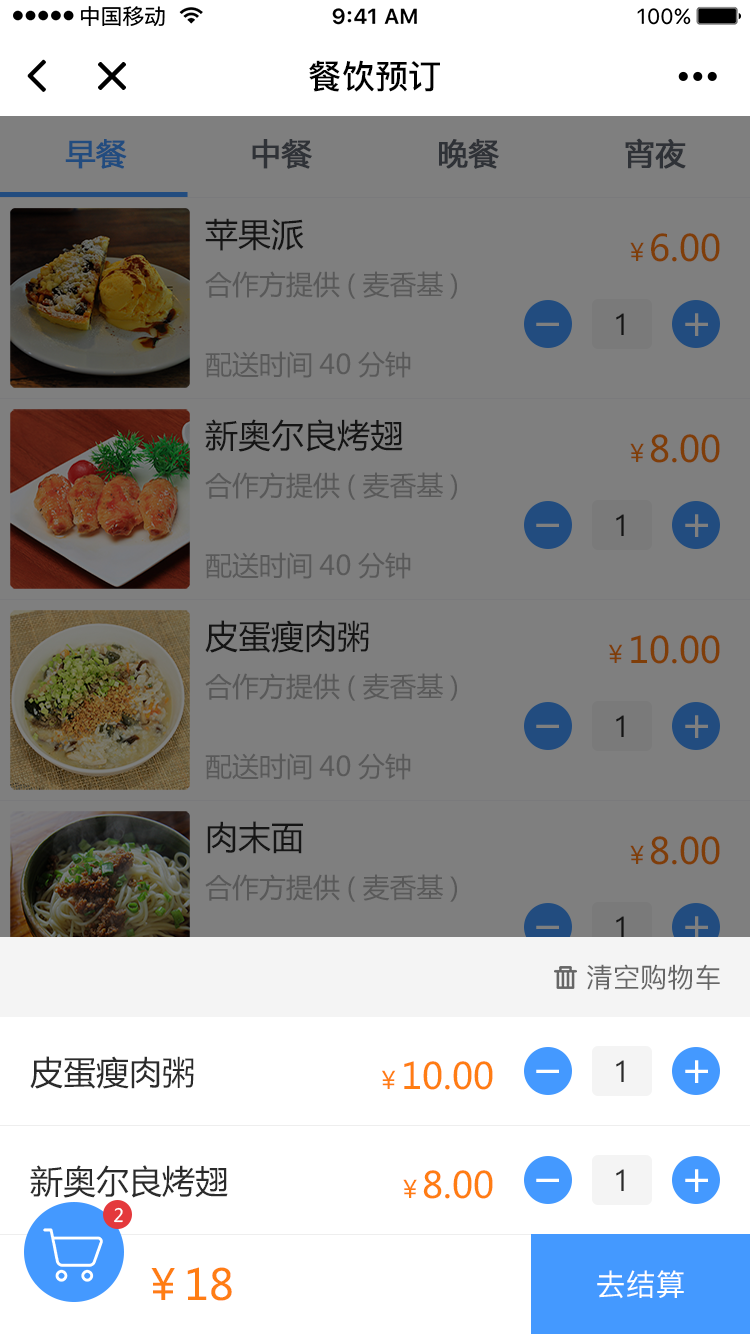
<style>
.page{position:relative;width:750px;height:1334px;background:#7f7f7f}
.page>*{position:absolute;margin:0}
.t1{font:33.2px "PingFang-SC-Bold";color:#000000}
.t2{font:30px "MicrosoftYaHei";color:#224c7f;font-weight:bold}
.t3{font:30px "MicrosoftYaHei";color:#2f3237;font-weight:bold}
.t4{font:33px "MicrosoftYaHei";color:#2b2b2b}
.t5{font:36px "MicrosoftYaHei";color:#7f3e09}
.t6{font:24px "MicrosoftYaHei";color:#7f3e09}
.t7{font:27px "MicrosoftYaHei";color:#595959}
.t8{font:30px "PingFang-SC-Medium";color:#2b2b2b}
.t9{font:27.2px "PingFang-SC-Medium";color:#666666}
.t10{font:36px "MicrosoftYaHei";color:#ff7d13}
.t11{font:24px "MicrosoftYaHei";color:#ff7d13}
.t12{font:18.1px "MicrosoftYaHei";color:#ffffff}
.t13{font:42.3px "MicrosoftYaHei";color:#ff7d13}
.t14{font:30px "PingFang-SC-Medium";color:#ffffff}
</style>
<div class="page">
<p class="t1" style="left:309px;top:60px;width:131px;height:32px">餐饮预订</p>
<p class="t2" style="left:65px;top:139px;width:62px;height:30px">早餐</p>
<p class="t3" style="left:252px;top:139px;width:60px;height:30px">中餐</p>
<p class="t3" style="left:439px;top:139px;width:60px;height:30px">晚餐</p>
<p class="t3" style="left:625px;top:138px;width:61px;height:31px">宵夜</p>
<p class="t4" style="left:205px;top:218px;width:99px;height:33px">苹果派</p>
<p class="t5" style="left:630px;top:233px;width:90px;height:29px"><span class="t6">￥</span>6.00</p>
<p class="t7" style="left:205px;top:271px;width:252px;height:28px">合作方提供(麦香基)</p>
<p class="t8" style="left:616px;top:313px;width:8px;height:22px">1</p>
<p class="t7" style="left:205px;top:351px;width:206px;height:27px">配送时间40分钟</p>
<p class="t4" style="left:205px;top:419px;width:198px;height:33px">新奥尔良烤翅</p>
<p class="t5" style="left:630px;top:434px;width:90px;height:29px"><span class="t6">￥</span>8.00</p>
<p class="t7" style="left:205px;top:472px;width:252px;height:28px">合作方提供(麦香基)</p>
<p class="t8" style="left:616px;top:514px;width:8px;height:22px">1</p>
<p class="t7" style="left:205px;top:552px;width:206px;height:27px">配送时间40分钟</p>
<p class="t4" style="left:205px;top:620px;width:164px;height:33px">皮蛋瘦肉粥</p>
<p class="t5" style="left:609px;top:635px;width:111px;height:29px"><span class="t6">￥</span>10.00</p>
<p class="t7" style="left:205px;top:673px;width:252px;height:28px">合作方提供(麦香基)</p>
<p class="t8" style="left:616px;top:715px;width:8px;height:22px">1</p>
<p class="t7" style="left:205px;top:753px;width:206px;height:27px">配送时间40分钟</p>
<p class="t4" style="left:207px;top:821px;width:96px;height:33px">肉末面</p>
<p class="t5" style="left:630px;top:836px;width:90px;height:29px"><span class="t6">￥</span>8.00</p>
<p class="t7" style="left:205px;top:874px;width:252px;height:28px">合作方提供(麦香基)</p>
<p class="t8" style="left:616px;top:916px;width:8px;height:22px">1</p>
<p class="t9" style="left:587px;top:964px;width:133px;height:26px">清空购物车</p>
<p class="t4" style="left:30px;top:1056px;width:164px;height:33px">皮蛋瘦肉粥</p>
<p class="t10" style="left:382px;top:1061px;width:111px;height:29px"><span class="t11">￥</span>10.00</p>
<p class="t8" style="left:616px;top:1060px;width:8px;height:22px">1</p>
<p class="t4" style="left:30px;top:1165px;width:198px;height:33px">新奥尔良烤翅</p>
<p class="t8" style="left:616px;top:1169px;width:8px;height:22px">1</p>
<p class="t10" style="left:403px;top:1170px;width:90px;height:29px"><span class="t11">￥</span>8.00</p>
<p class="t12" style="left:114px;top:1207px;width:9px;height:16px">2</p>
<p class="t13" style="left:151px;top:1267px;width:81px;height:34px">￥18</p>
<p class="t14" style="left:597px;top:1270px;width:87px;height:29px">去结算</p>
</div>
